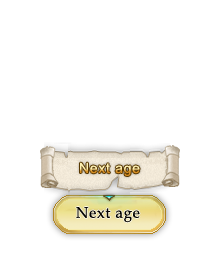
<style>
.page{position:relative;width:222px;height:275px;background:#ffffff}
.page>*{position:absolute;margin:0}
.t1{font:15.4px "BookAntiqua";letter-spacing:0.05em;color:#070502;scale:0.97 1}
</style>
<div class="page">
<p class="t1" style="left:76px;top:207px;width:64px;height:16px">Next age</p>
</div>
